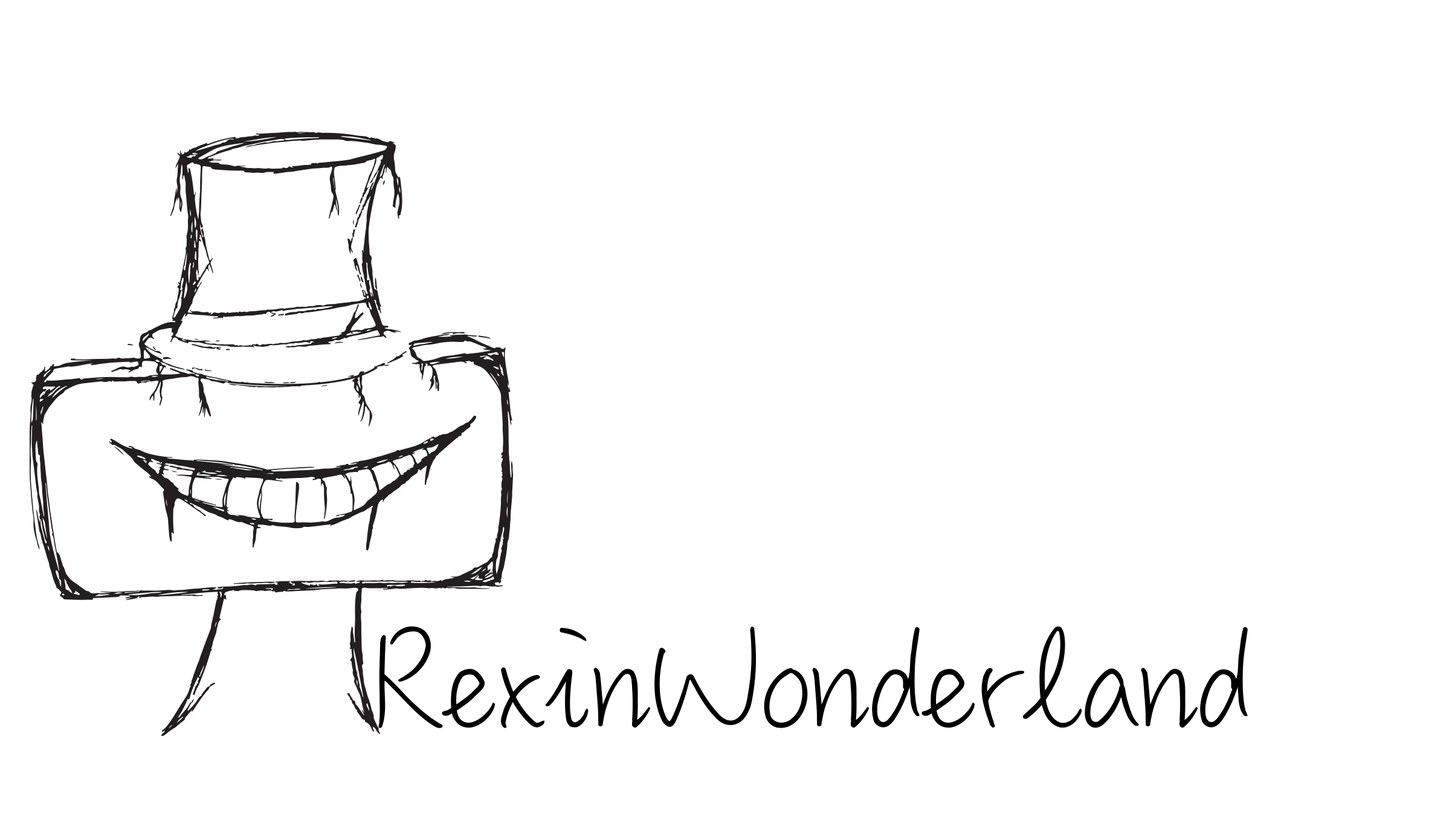
<style>
.page{position:relative;width:1455px;height:820px;background:#ffffff}
.page>*{position:absolute;margin:0}
.t1{font:151px "MLingWaiMedium-SC";color:#000000}
</style>
<div class="page">
<p class="t1" style="left:378px;top:626px;width:869px;height:102px">RexinWonderland</p>
</div>
